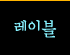
<style>
.page{position:relative;width:70px;height:55px;background:#000000}
.page>*{position:absolute;margin:0}
.t1{font:20px "ÈÆ¹Î¹ÙÅÁ¹ÝÃ¼";color:#87f2ff;font-weight:bold;scale:0.8 1}
</style>
<div class="page">
<p class="t1" style="left:14px;top:20px;width:43px;height:18px">레이블</p>
</div>
